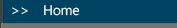
<style>
.page{position:relative;width:177px;height:28px;background:#004261}
.page>*{position:absolute;margin:0}
.t1{font:14px "SegoeWP";letter-spacing:-0.025em;color:#ffffff}
</style>
<div class="page">
<p class="t1" style="left:12px;top:5px;width:68px;height:11px">&gt;&gt;    Home</p>
</div>
